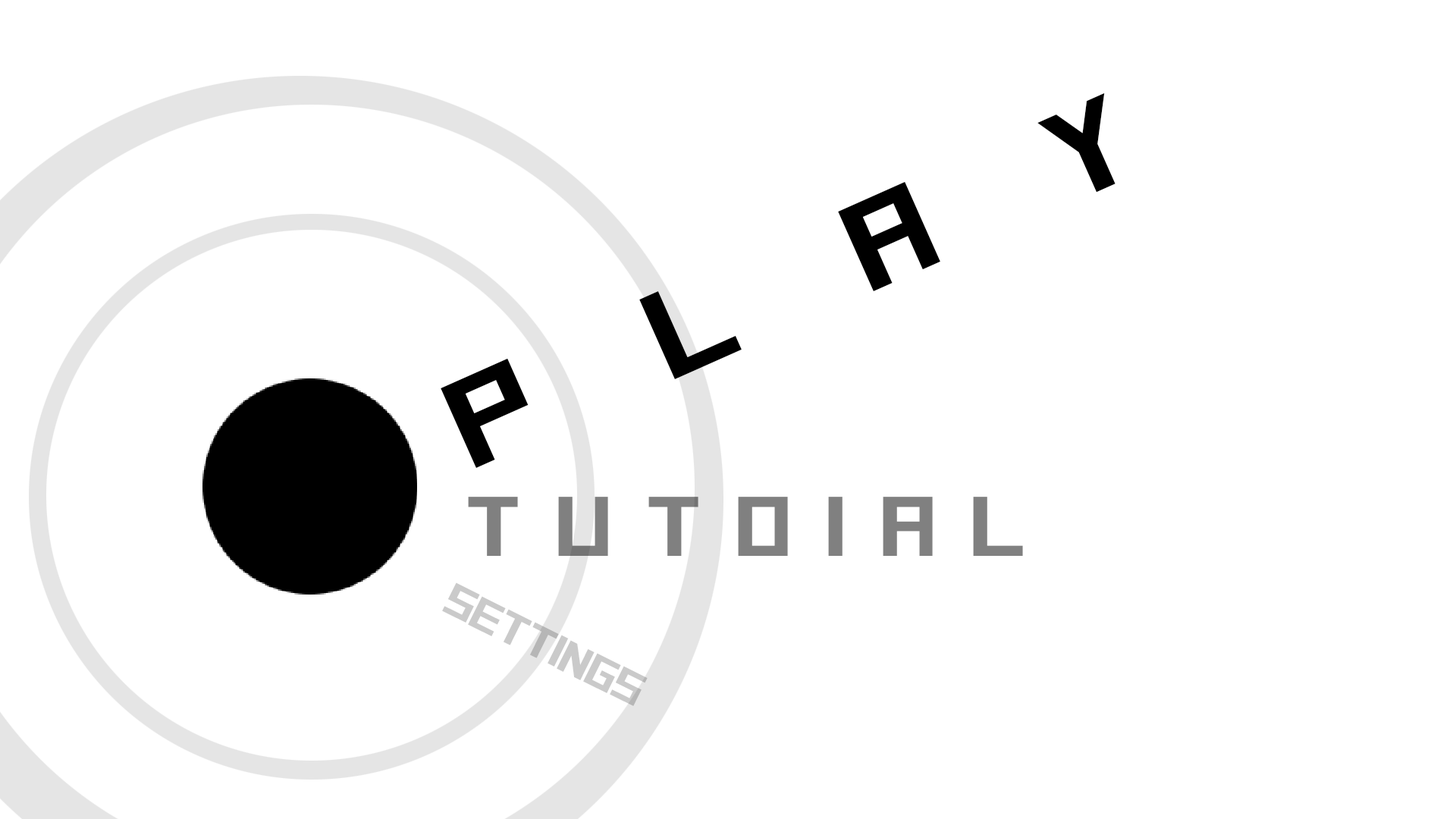
<style>
.page{position:relative;width:1456px;height:819px;background:#ffffff}
.page>*{position:absolute;margin:0}
.t1{font:124.4px "SquareFont";letter-spacing:0.855em;color:#000000;scale:1.22 1}
.t2{font:83.9px "SquareFont";letter-spacing:0.3em;color:#808080;scale:1.22 1}
.t3{font:44.8px "SquareFont";letter-spacing:-0.04em;color:#cacaca;scale:1.22 1}
</style>
<div class="page">
<p class="t1" style="left:441px;top:93px;width:674px;height:376px;rotate:-24deg">PLAY</p>
<p class="t2" style="left:468px;top:497px;width:555px;height:59px">Tutoial</p>
<p class="t3" style="left:442px;top:582px;width:206px;height:124px;rotate:26deg">Settings</p>
</div>
